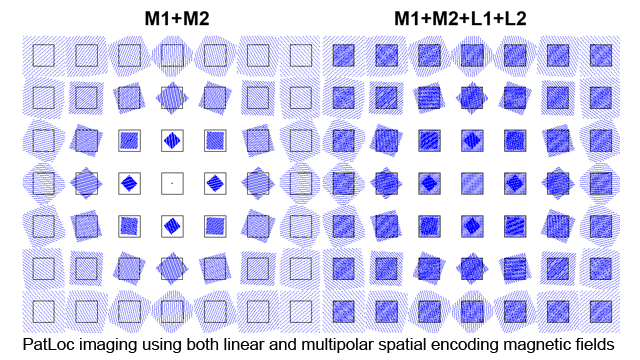
<style>
.page{position:relative;width:640px;height:360px;background:#ffffff}
.page>*{position:absolute;margin:0}
.t1{font:16.7px "ArialMT";color:#000000}
</style>
<div class="page">
<p class="t1" style="left:23px;top:338px;width:592px;height:15px">PatLoc imaging using both linear and multipolar spatial encoding magnetic fields</p>
</div>
